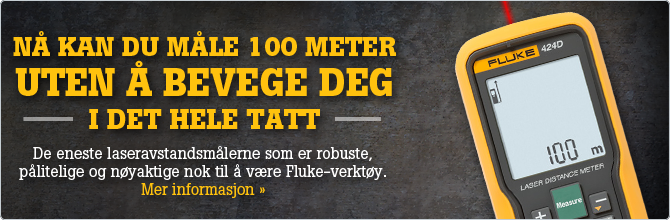
<style>
.page{position:relative;width:670px;height:220px}
.page>*{position:absolute;margin:0}
.t1{font:26.8px/44.8px "BotonPro-Bold";color:#ffc20e;text-transform:uppercase}
.t2{font:38px/40px "BotonPro-Bold";color:#ffc20e;text-transform:uppercase}
.t3{font:28px/33px "BotonPro-Bold";color:#ffc20e;text-transform:uppercase}
.t4{font:16px/18px "BotonPro-Regular";color:#ffffff}
.t5{font:16px/18px "BotonPro-Regular";color:#ffc20e}
</style>
<div class="page">
<p class="t1" style="left:13px;top:31px;width:383px;height:98px;text-align:center">Nå kan du måle 100 meter <span class="t2">uten å bevege deg <br></span><span class="t3">i det hele tatt</span></p>
<p class="t4" style="left:19px;top:146px;width:367px;height:52px;text-align:center">De eneste laseravstandsmålerne som er robuste, pålitelige og nøyaktige nok til å være Fluke-verktøy. <span class="t5">Mer informasjon »</span></p>
</div>
